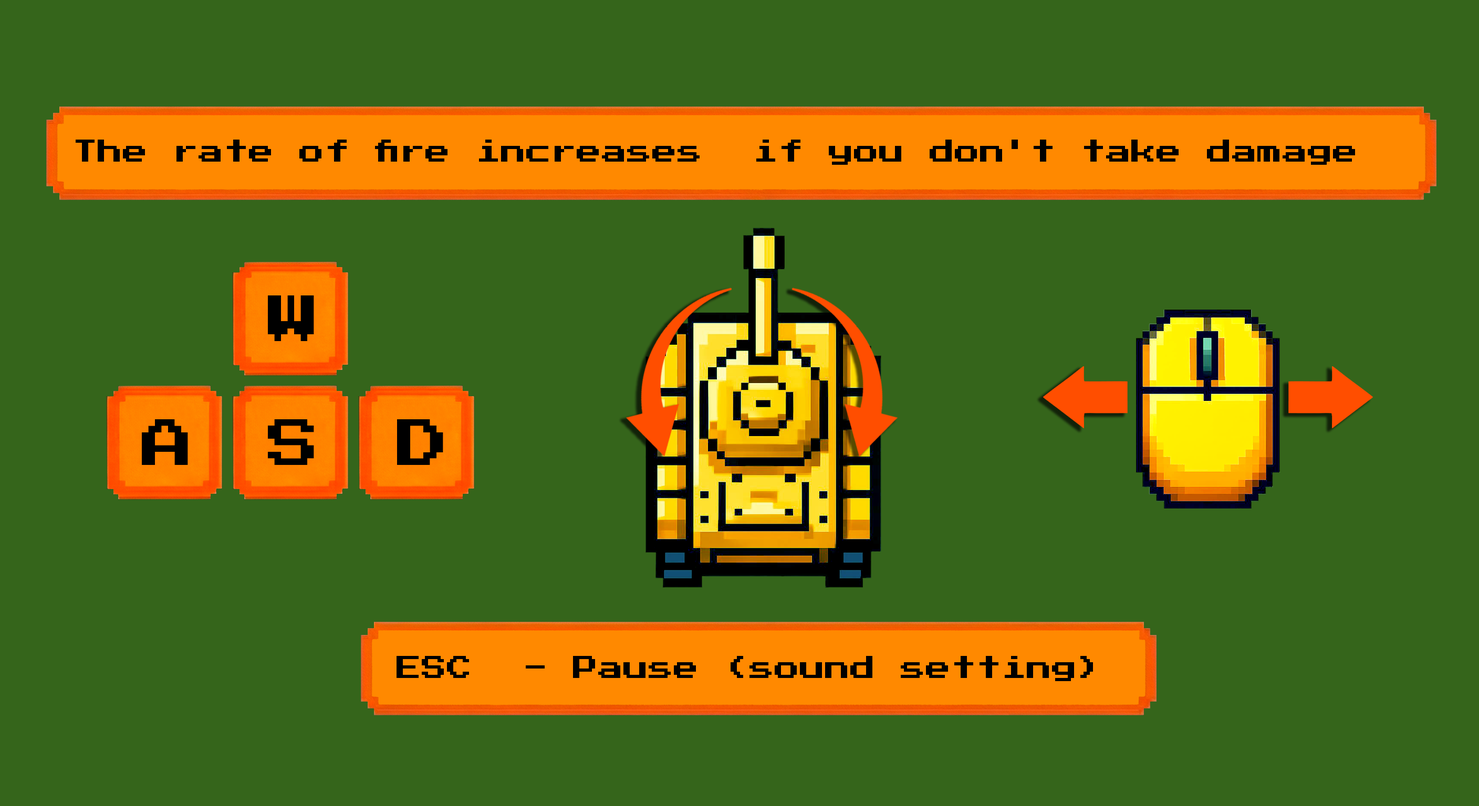
<style>
.page{position:relative;width:1479px;height:806px;background:#35651b}
.page>*{position:absolute;margin:0}
.t1{font:25.2px "PressStart2P-Regular";color:#000000}
.t2{font:52.5px "PressStart2P-Regular";color:#000000}
</style>
<div class="page">
<p class="t1" style="left:76px;top:140px;width:1279px;height:25px">The rate of fire increases  if you don't take damage</p>
<p class="t2" style="left:268px;top:296px;width:46px;height:45px">W</p>
<p class="t2" style="left:142px;top:420px;width:46px;height:45px">A</p>
<p class="t2" style="left:268px;top:420px;width:46px;height:45px">S</p>
<p class="t2" style="left:397px;top:420px;width:46px;height:45px">D</p>
<p class="t1" style="left:396px;top:656px;width:697px;height:26px">ESC  - Pause (sound setting)</p>
</div>
